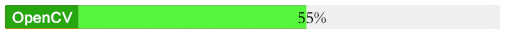
<style>
.page{position:relative;width:507px;height:35px;background:#56f53c}
.page>*{position:absolute;margin:0}
.t1{font:13.3px "FZLTCHK--GBK1-0";color:#ffffff}
.t2{font:17px "FZBSK--GBK1-0";color:#000000}
</style>
<div class="page">
<p class="t1" style="left:12px;top:11px;width:61px;height:15px">OpenCV</p>
<p class="t2" style="left:298px;top:11px;width:28px;height:13px">55%</p>
</div>
